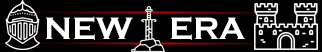
<style>
.page{position:relative;width:322px;height:52px;background:#000000}
.page>*{position:absolute;margin:0}
.t1{font:32px "CopperplateGothic-Bold";color:#ffffff;text-transform:uppercase}
</style>
<div class="page">
<p class="t1" style="left:46px;top:16px;width:87px;height:24px">new</p>
<p class="t1" style="left:171px;top:16px;width:74px;height:24px">era</p>
</div>
